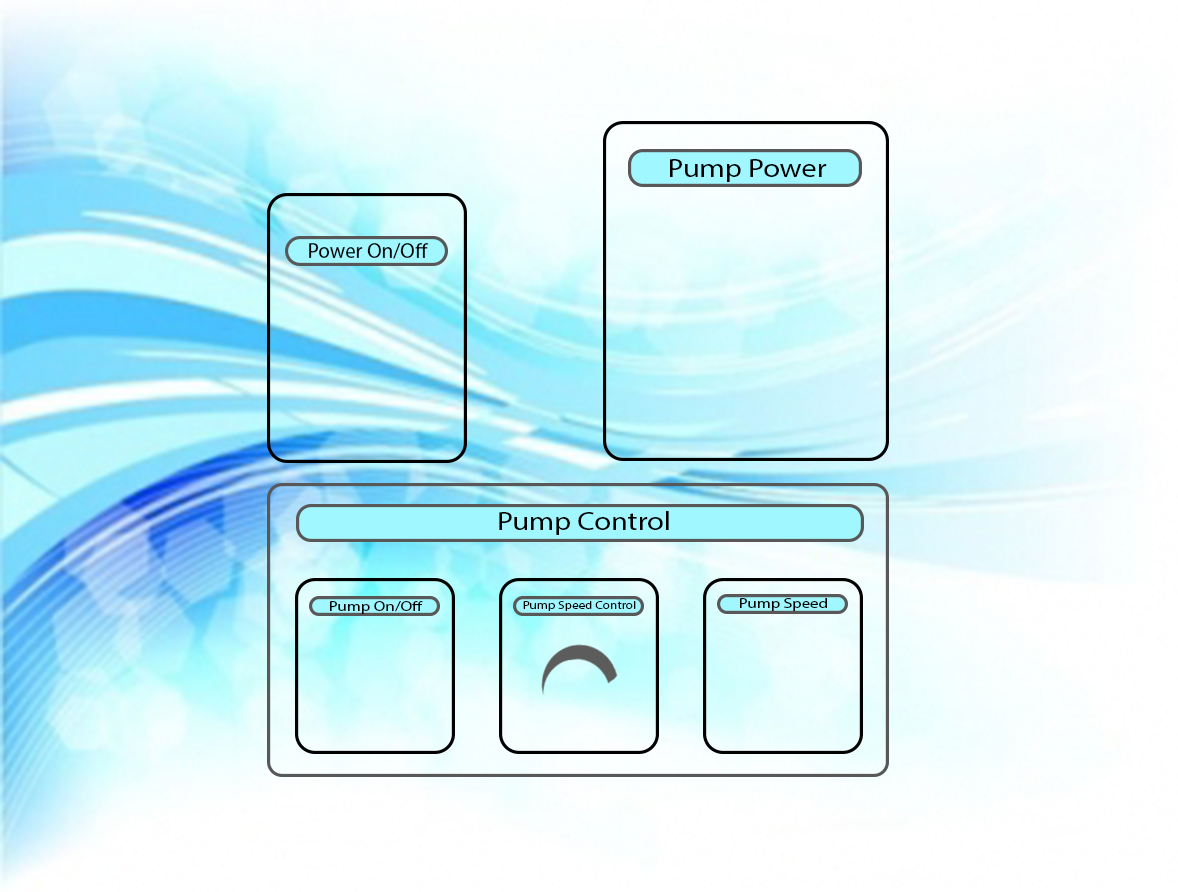
<style>
.page{position:relative;width:1178px;height:892px}
.page>*{position:absolute;margin:0}
.t1{font:26.5px "MyriadPro-Regular";color:#000000;scale:1.13 1}
.t2{font:21px "MyriadPro-Regular";color:#000000}
.t3{font:13.7px "MyriadPro-Regular";color:#000000;scale:1.22 1}
.t4{font:10.7px "MyriadPro-Regular";color:#000000;scale:1.22 1}
</style>
<div class="page">
<p class="t1" style="left:670px;top:159px;width:157px;height:23px">Pump Power</p>
<p class="t2" style="left:309px;top:243px;width:120px;height:16px">Power On/Off</p>
<p class="t1" style="left:499px;top:511px;width:170px;height:24px">Pump Control</p>
<p class="t3" style="left:330px;top:601px;width:93px;height:13px">Pump On/Off</p>
<p class="t4" style="left:523px;top:601px;width:113px;height:10px">Pump Speed Control</p>
<p class="t3" style="left:740px;top:598px;width:87px;height:13px">Pump Speed</p>
</div>
